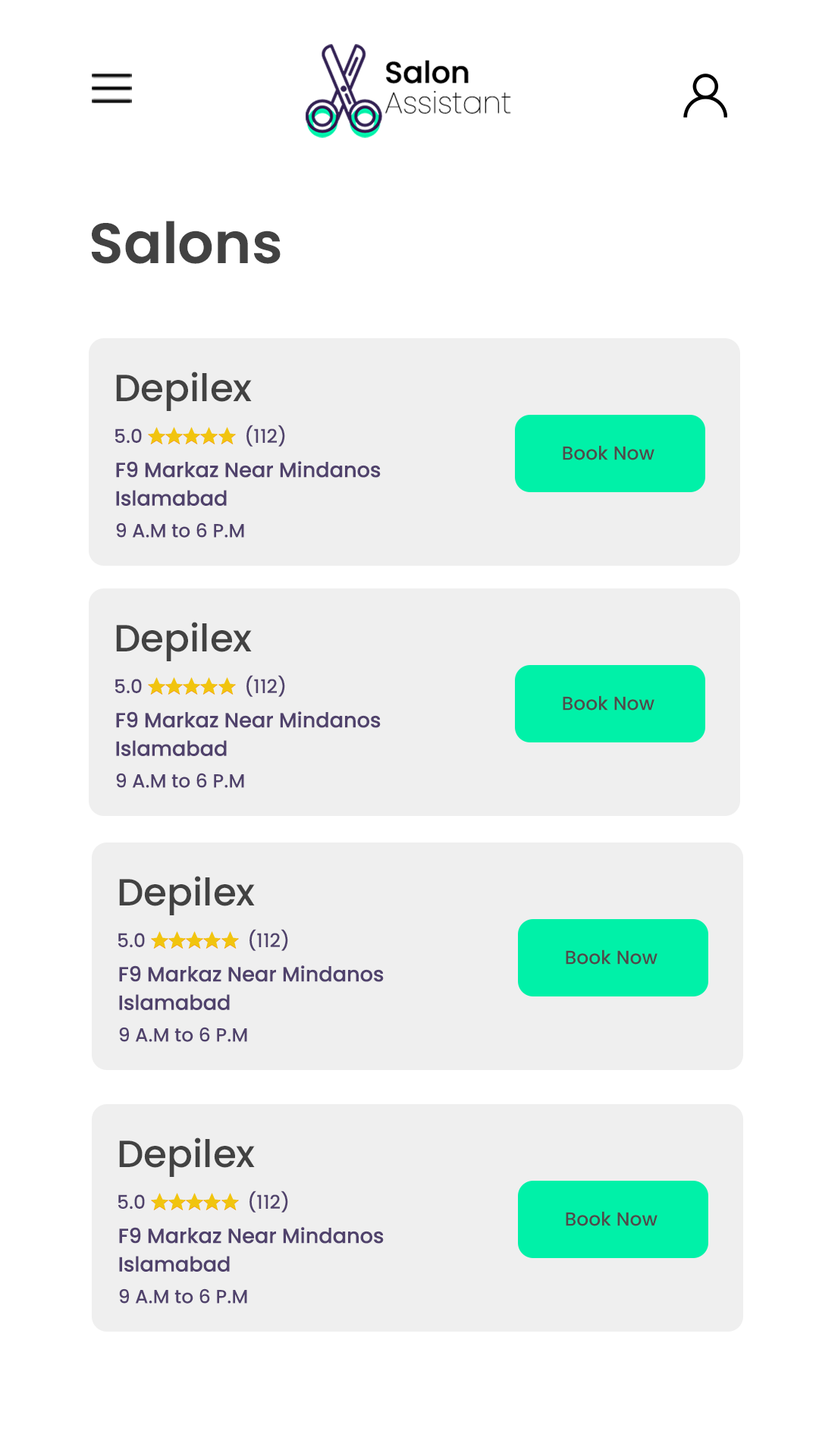
<style>
.page{position:relative;width:819px;height:1456px;background:#ffffff}
.page>*{position:absolute;margin:0}
.t1{font:56.9px "Poppins-SemiBold";color:#424242}
.t2{font:37.9px "Poppins-Medium";color:#424242}
.t3{font:19px "Poppins-Medium";color:#50426c}
.t4{font:19px "Poppins-Medium";color:#4c4c4c}
.t5{font:20.5px/28.4px "Poppins-Medium";color:#50426c}
</style>
<div class="page">
<p class="t1" style="left:91px;top:221px;width:190px;height:43px">Salons</p>
<p class="t2" style="left:116px;top:372px;width:136px;height:39px">Depilex</p>
<p class="t3" style="left:246px;top:425px;width:39px;height:22px">(112)</p>
<p class="t3" style="left:115px;top:428px;width:27px;height:16px">5.0</p>
<p class="t4" style="left:563px;top:445px;width:91px;height:15px">Book Now</p>
<p class="t5" style="left:116px;top:461px;width:265px;height:45px">F9 Markaz Near Mindanos<br>Islamabad</p>
<p class="t3" style="left:116px;top:522px;width:128px;height:16px">9 A.M to 6 P.M</p>
<p class="t2" style="left:116px;top:622px;width:136px;height:39px">Depilex</p>
<p class="t3" style="left:246px;top:675px;width:39px;height:22px">(112)</p>
<p class="t3" style="left:115px;top:679px;width:27px;height:15px">5.0</p>
<p class="t4" style="left:563px;top:695px;width:91px;height:16px">Book Now</p>
<p class="t5" style="left:116px;top:711px;width:265px;height:45px">F9 Markaz Near Mindanos<br>Islamabad</p>
<p class="t3" style="left:116px;top:773px;width:128px;height:15px">9 A.M to 6 P.M</p>
<p class="t2" style="left:119px;top:876px;width:136px;height:39px">Depilex</p>
<p class="t3" style="left:249px;top:929px;width:39px;height:22px">(112)</p>
<p class="t3" style="left:118px;top:933px;width:27px;height:15px">5.0</p>
<p class="t4" style="left:566px;top:949px;width:91px;height:16px">Book Now</p>
<p class="t5" style="left:119px;top:965px;width:265px;height:45px">F9 Markaz Near Mindanos<br>Islamabad</p>
<p class="t3" style="left:119px;top:1027px;width:128px;height:15px">9 A.M to 6 P.M</p>
<p class="t2" style="left:119px;top:1137px;width:136px;height:40px">Depilex</p>
<p class="t3" style="left:249px;top:1191px;width:39px;height:22px">(112)</p>
<p class="t3" style="left:118px;top:1194px;width:27px;height:16px">5.0</p>
<p class="t4" style="left:566px;top:1211px;width:91px;height:15px">Book Now</p>
<p class="t5" style="left:119px;top:1227px;width:265px;height:45px">F9 Markaz Near Mindanos<br>Islamabad</p>
<p class="t3" style="left:119px;top:1288px;width:128px;height:16px">9 A.M to 6 P.M</p>
</div>
